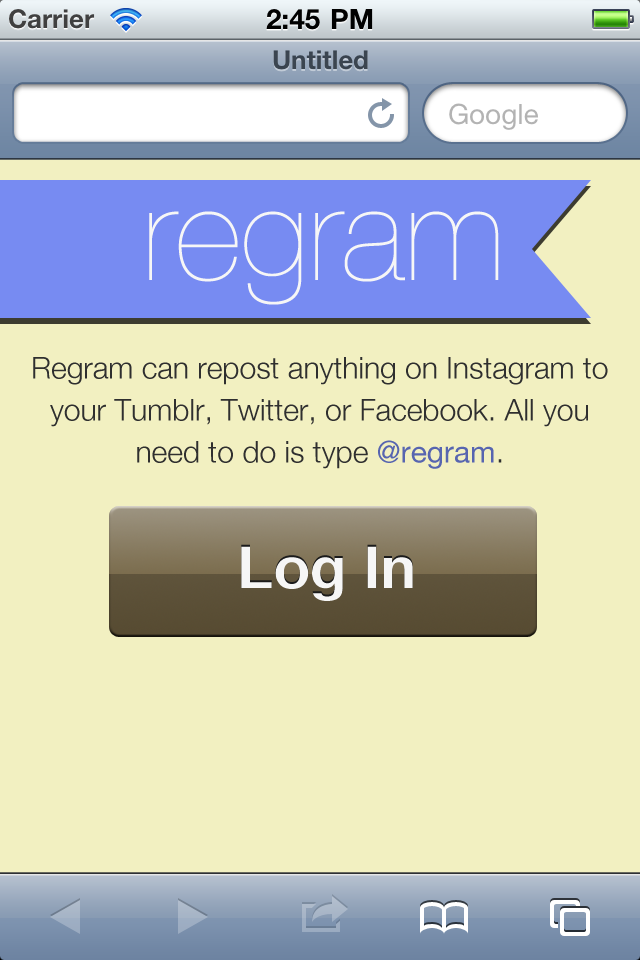
<style>
.page{position:relative;width:640px;height:960px;background:#f2f0c1}
.page>*{position:absolute;margin:0}
.t1{font:130px "HelveticaNeue-UltraLight";color:#f6f6f6}
.t2{font:30px/42px "HelveticaNeue-Light";color:#2f2f2f}
.t3{font:30px/42px "HelveticaNeue";color:#5765b0}
.t4{font:60px "Helvetica-Bold";color:#f6f6f6}
</style>
<div class="page">
<p class="t1" style="left:149px;top:211px;width:350px;height:94px">regram</p>
<p class="t2" style="left:33px;top:357px;width:575px;height:112px;text-align:center">Regram can repost anything on Instagram to your Tumblr, Twitter, or Facebook. All you need to do is type <span class="t3">@regram</span>.</p>
<p class="t4" style="left:241px;top:544px;width:172px;height:57px">Log In</p>
</div>
